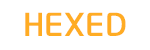
<style>
.page{position:relative;width:150px;height:50px;background:#ffffff}
.page>*{position:absolute;margin:0}
.t1{font:33.3px "GyeonggiTitleMOTF";color:#ffac23}
</style>
<div class="page">
<p class="t1" style="left:25px;top:12px;width:101px;height:24px">HEXED</p>
</div>
